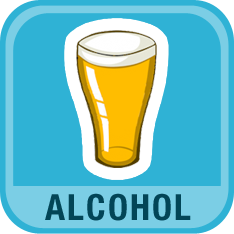
<style>
.page{position:relative;width:234px;height:234px;background:#2fb2d5}
.page>*{position:absolute;margin:0}
.t1{font:36px "HelveticaNeue-BoldCond";letter-spacing:0.06em;color:#024557}
</style>
<div class="page">
<p class="t1" style="left:45px;top:193px;width:146px;height:28px">ALCOHOL</p>
</div>
